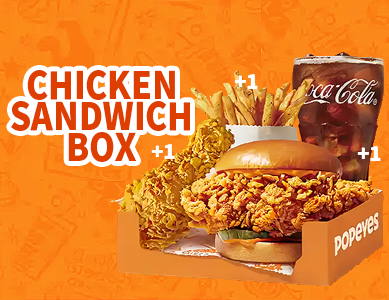
<style>
.page{position:relative;width:389px;height:300px}
.page>*{position:absolute;margin:0}
.t1{font:37.4px/31.1px "NotoSansKR-Black";color:#de3f00;scale:0.88 1}
.t2{font:20px "NotoSansKR-Black";color:#ffffff}
</style>
<div class="page">
<p class="t1" style="left:11px;top:70px;width:179px;height:92px;text-align:center">CHICKEN<br>SANDWICH<br>BOX</p>
<p class="t2" style="left:234px;top:74px;width:24px;height:15px">+1</p>
<p class="t2" style="left:151px;top:144px;width:24px;height:15px">+1</p>
<p class="t2" style="left:357px;top:146px;width:24px;height:15px">+1</p>
</div>
